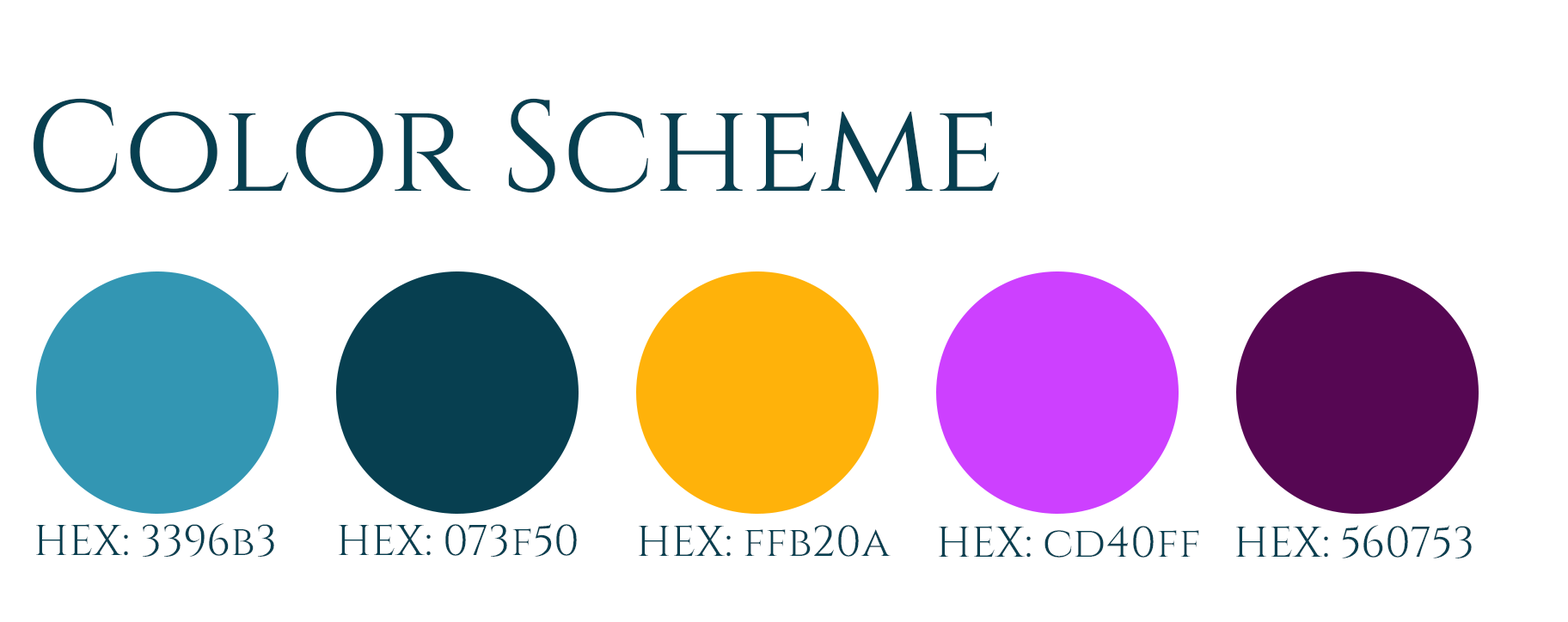
<style>
.page{position:relative;width:1568px;height:622px;background:#ffffff}
.page>*{position:absolute;margin:0}
.t1{font:128.9px "Cinzel-Regular";color:#073f50}
.t2{font:43px "Cinzel-Regular";color:#073f50}
</style>
<div class="page">
<p class="t1" style="left:34px;top:98px;width:966px;height:95px">Color Scheme</p>
<p class="t2" style="left:36px;top:524px;width:238px;height:33px">HEX: 3396b3</p>
<p class="t2" style="left:339px;top:524px;width:238px;height:33px">HEX: 073f50</p>
<p class="t2" style="left:639px;top:525px;width:252px;height:32px">HEX: ffb20a</p>
<p class="t2" style="left:939px;top:526px;width:260px;height:32px">HEX: cd40ff</p>
<p class="t2" style="left:1236px;top:525px;width:236px;height:34px">HEX: 560753</p>
</div>
